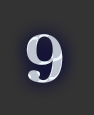
<style>
.page{position:relative;width:94px;height:115px;background:#333333}
.page>*{position:absolute;margin:0}
.t1{font:67.7px "FZQKBYSJW--GB1-0";color:#bfc6d2;scale:1.54 1}
</style>
<div class="page">
<p class="t1" style="left:26px;top:34px;width:37px;height:49px">9</p>
</div>
